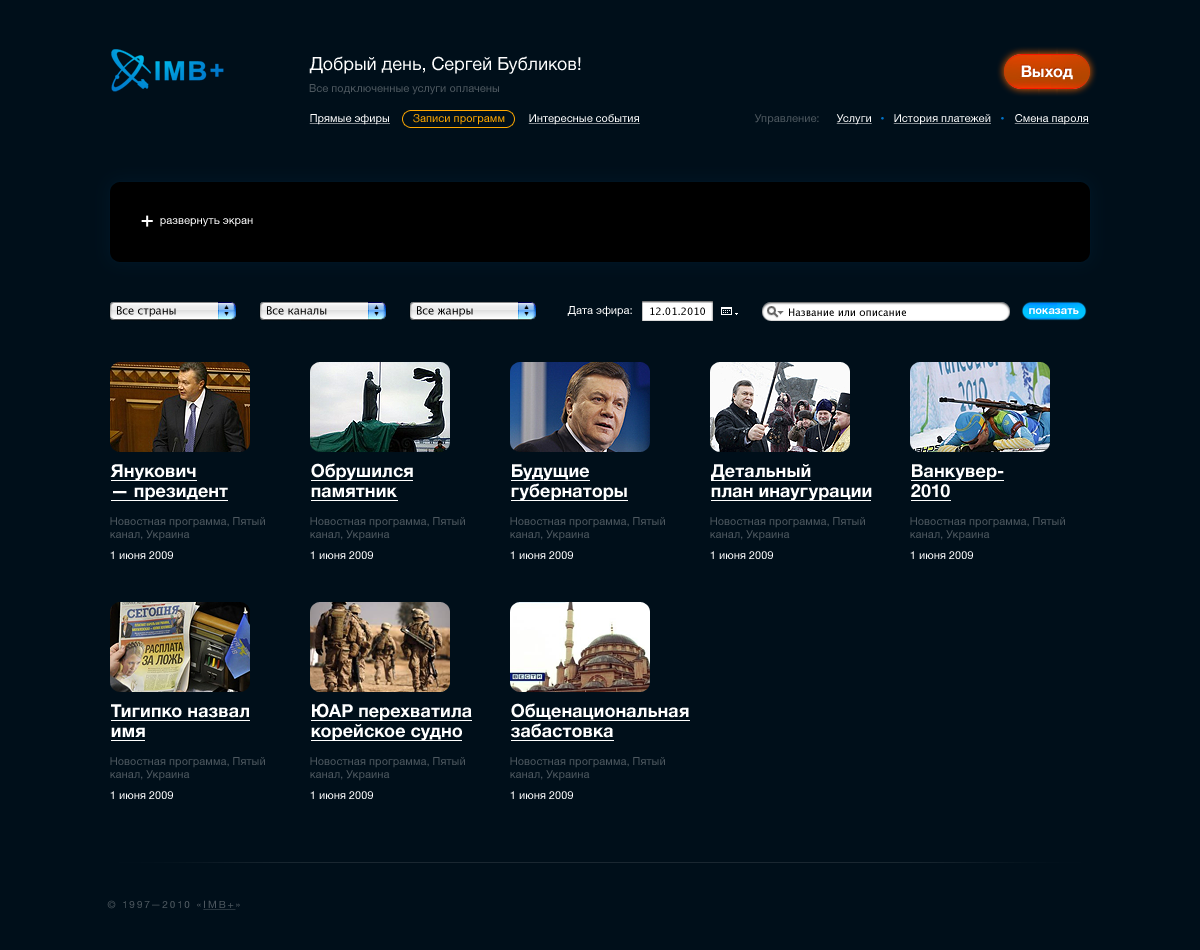
<style>
.page{position:relative;width:1200px;height:950px;background:#000f1a}
.page>*{position:absolute;margin:0}
.t1{font:18px "HelveticaNeue";color:#ffffff}
.t2{font:16px "HelveticaNeue-Bold";color:#ffffff}
.t3{font:11px "HelveticaNeue";color:#4d575f}
.t4{font:11px "HelveticaNeue";color:#ffffff;text-decoration:underline}
.t5{font:11px "HelveticaNeue";color:#ffa800}
.t6{font:11px "HelveticaNeue";color:#ffffff}
.t7{font:11px "LucidaGrande";color:#000000}
.t8{font:10px "LucidaGrande";color:#000000}
.t9{font:11px "HelveticaNeue-Bold";color:#ffffff}
.t10{font:18px/20px "HelveticaNeue-Bold";color:#ffffff}
.t11{font:10px "HelveticaNeue";letter-spacing:0.2em;color:#4d575f;text-transform:uppercase}
.t12{font:10px "HelveticaNeue";letter-spacing:0.2em;color:#4d575f;text-transform:uppercase;text-decoration:underline}
</style>
<div class="page">
<p class="t1" style="left:309px;top:56px;width:272px;height:18px">Добрый день, Сергей Бубликов!</p>
<p class="t2" style="left:1021px;top:65px;width:52px;height:15px">Выход</p>
<p class="t3" style="left:309px;top:84px;width:190px;height:11px">Все подключенные услуги оплачены</p>
<p class="t4" style="left:309px;top:114px;width:81px;height:11px">Прямые эфиры</p>
<p class="t5" style="left:413px;top:114px;width:92px;height:11px">Записи программ</p>
<p class="t4" style="left:528px;top:114px;width:112px;height:11px">Интересные события</p>
<p class="t3" style="left:754px;top:114px;width:65px;height:11px">Управление:</p>
<p class="t4" style="left:836px;top:114px;width:36px;height:11px">Услуги</p>
<p class="t4" style="left:893px;top:114px;width:98px;height:11px">История платежей</p>
<p class="t4" style="left:1014px;top:114px;width:75px;height:11px">Смена пароля</p>
<p class="t6" style="left:160px;top:218px;width:93px;height:9px">развернуть экран</p>
<p class="t7" style="left:117px;top:306px;width:59px;height:11px">Все страны</p>
<p class="t7" style="left:267px;top:306px;width:60px;height:9px">Все каналы</p>
<p class="t7" style="left:417px;top:306px;width:56px;height:11px">Все жанры</p>
<p class="t6" style="left:567px;top:306px;width:65px;height:11px">Дата эфира:</p>
<p class="t8" style="left:650px;top:307px;width:55px;height:8px">12.01.2010</p>
<p class="t8" style="left:789px;top:308px;width:117px;height:8px">Название или описание</p>
<p class="t9" style="left:1029px;top:308px;width:50px;height:6px">показать</p>
<p class="t10" style="left:110px;top:464px;width:118px;height:37px">Янукович<br>— президент</p>
<p class="t10" style="left:311px;top:463px;width:102px;height:35px">Обрушился<br>памятник</p>
<p class="t10" style="left:511px;top:464px;width:116px;height:37px">Будущие<br>губернаторы</p>
<p class="t10" style="left:711px;top:464px;width:161px;height:37px">Детальный<br>план инаугурации</p>
<p class="t10" style="left:911px;top:464px;width:93px;height:34px">Ванкувер-<br>2010</p>
<p class="t3" style="left:110px;top:517px;width:155px;height:24px">Новостная программа, Пятый<br>канал, Украина</p>
<p class="t3" style="left:310px;top:517px;width:155px;height:24px">Новостная программа, Пятый<br>канал, Украина</p>
<p class="t3" style="left:510px;top:517px;width:155px;height:24px">Новостная программа, Пятый<br>канал, Украина</p>
<p class="t3" style="left:710px;top:517px;width:155px;height:24px">Новостная программа, Пятый<br>канал, Украина</p>
<p class="t3" style="left:910px;top:517px;width:155px;height:24px">Новостная программа, Пятый<br>канал, Украина</p>
<p class="t6" style="left:110px;top:551px;width:63px;height:8px">1 июня 2009</p>
<p class="t6" style="left:310px;top:551px;width:63px;height:8px">1 июня 2009</p>
<p class="t6" style="left:510px;top:551px;width:63px;height:8px">1 июня 2009</p>
<p class="t6" style="left:710px;top:551px;width:63px;height:8px">1 июня 2009</p>
<p class="t6" style="left:910px;top:551px;width:63px;height:8px">1 июня 2009</p>
<p class="t10" style="left:111px;top:704px;width:138px;height:33px">Тигипко назвал<br>имя</p>
<p class="t10" style="left:311px;top:703px;width:161px;height:38px">ЮАР перехватила<br>корейское судно</p>
<p class="t10" style="left:511px;top:703px;width:178px;height:35px">Общенациональная<br>забастовка</p>
<p class="t3" style="left:110px;top:757px;width:155px;height:24px">Новостная программа, Пятый<br>канал, Украина</p>
<p class="t3" style="left:310px;top:757px;width:155px;height:24px">Новостная программа, Пятый<br>канал, Украина</p>
<p class="t3" style="left:510px;top:757px;width:155px;height:24px">Новостная программа, Пятый<br>канал, Украина</p>
<p class="t6" style="left:110px;top:791px;width:63px;height:8px">1 июня 2009</p>
<p class="t6" style="left:310px;top:791px;width:63px;height:8px">1 июня 2009</p>
<p class="t6" style="left:510px;top:791px;width:63px;height:8px">1 июня 2009</p>
<p class="t11" style="left:107px;top:900px;width:133px;height:10px">© 1997—2010 «<span class="t12">IMB+</span>»</p>
</div>
